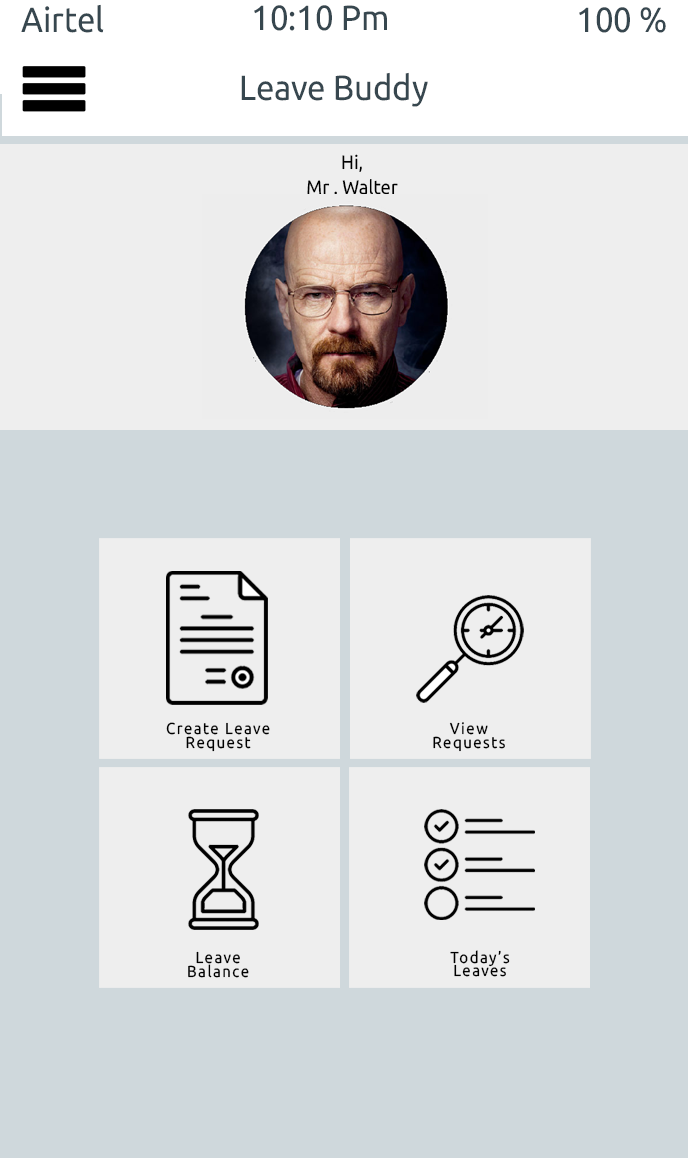
<style>
.page{position:relative;width:688px;height:1158px;background:#eeeeee}
.page>*{position:absolute;margin:0}
.t1{font:35px "Ubuntu";color:#37474f;scale:0.94 1}
.t2{font:19.5px/5px "Ubuntu";color:#000000;scale:0.94 1}
.t3{font:15.9px/13.5px "Ubuntu";letter-spacing:0.1em;color:#000000;scale:0.94 1}
</style>
<div class="page">
<p class="t1" style="left:21px;top:4px;width:83px;height:29px">Airtel</p>
<p class="t1" style="left:254px;top:5px;width:133px;height:26px">10:10 Pm</p>
<p class="t1" style="left:579px;top:7px;width:87px;height:26px">100 %</p>
<p class="t1" style="left:241px;top:72px;width:187px;height:35px">Leave Buddy</p>
<p class="t2" style="left:307px;top:154px;width:91px;height:41px;text-align:center">Hi,<br><br><br><br><br>Mr . Walter</p>
<p class="t3" style="left:166px;top:722px;width:104px;height:30px;text-align:center">Create Leave<br>Request</p>
<p class="t3" style="left:433px;top:722px;width:72px;height:30px;text-align:center">View<br>Requests</p>
<p class="t3" style="left:188px;top:951px;width:61px;height:27px;text-align:center">Leave<br>Balance</p>
<p class="t3" style="left:450px;top:950px;width:60px;height:27px;text-align:center">Today’s<br>Leaves</p>
</div>
